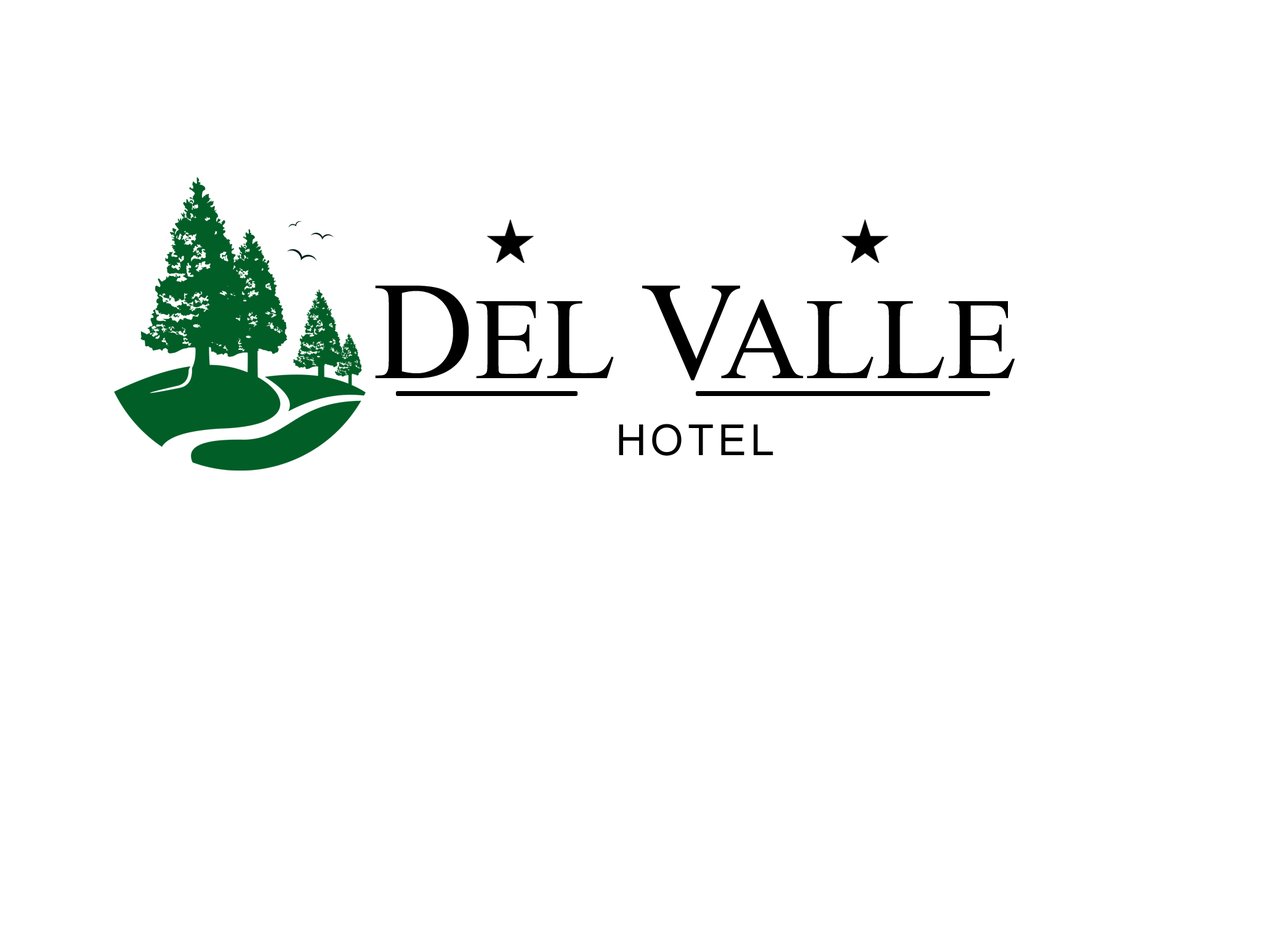
<style>
.page{position:relative;width:1261px;height:946px;background:#ffffff}
.page>*{position:absolute;margin:0}
.t1{font:173.5px "Microsoft-Himalaya";color:#000000}
.t2{font:208.2px "Microsoft-Himalaya";color:#000000}
.t3{font:208.2px "Microsoft-Himalaya";letter-spacing:-0.1em;color:#000000}
.t4{font:42.6px "ArialMT";letter-spacing:0.1em;color:#000000}
</style>
<div class="page">
<p class="t1" style="left:375px;top:285px;width:640px;height:95px"><span class="t2">D</span>EL <span class="t3">V</span>ALLE</p>
<p class="t4" style="left:619px;top:424px;width:154px;height:32px">HOTEL</p>
</div>
